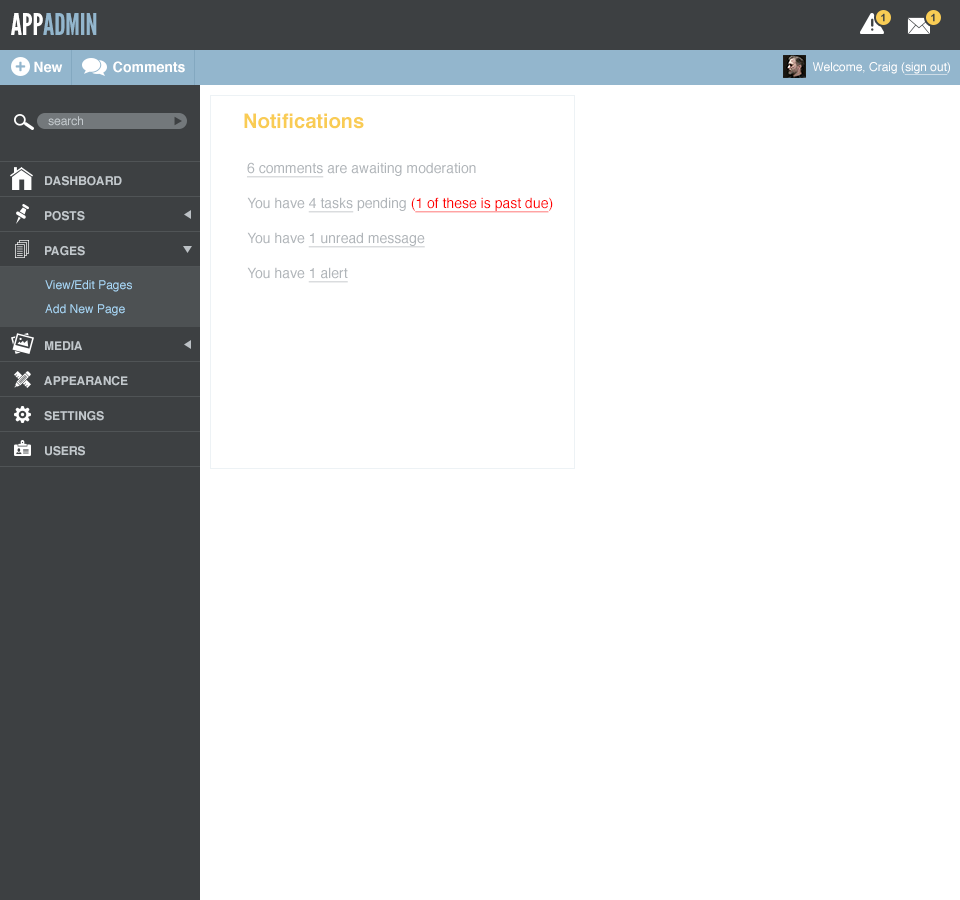
<style>
.page{position:relative;width:960px;height:900px;background:#ffffff}
.page>*{position:absolute;margin:0}
.t1{font:30px "LeagueGothic";color:#93b6cd}
.t2{font:30px "LeagueGothic";color:#ffffff}
.t3{font:14px "Helvetica-Bold";color:#ffffff}
.t4{font:12px "Helvetica";color:#ffffff}
.t5{font:12px "Helvetica";color:#ffffff;text-decoration:underline}
.t6{font:20px "Helvetica-Bold";color:#f9cc54}
.t7{font:12px "Helvetica";color:#c2c8cc}
.t8{font:14px/35px "Helvetica";color:#b0b5b9}
.t9{font:14px/35px "Helvetica";color:#b0b5b9;text-decoration:underline}
.t10{font:14px/35px "Helvetica";color:#ff0101}
.t11{font:14px/35px "Helvetica";color:#ff0101;text-decoration:underline}
.t12{font:12px "Helvetica-Bold";color:#c2c8cc}
.t13{font:12px/24px "Helvetica";color:#a9d7f6}
</style>
<div class="page">
<p class="t1" style="left:11px;top:13px;width:86px;height:22px"><span class="t2">APP</span>ADMIN</p>
<p class="t3" style="left:34px;top:61px;width:29px;height:12px">New</p>
<p class="t3" style="left:113px;top:61px;width:72px;height:12px">Comments</p>
<p class="t4" style="left:813px;top:62px;width:137px;height:13px">Welcome, Craig (<span class="t5">sign out</span>)</p>
<p class="t6" style="left:244px;top:113px;width:120px;height:16px">Notifications</p>
<p class="t7" style="left:48px;top:116px;width:35px;height:10px">search</p>
<p class="t8" style="left:247px;top:162px;width:306px;height:121px"><span class="t9">6 comments</span> are awaiting moderation<br>You have <span class="t9">4 tasks</span> pending <span class="t10">(</span><span class="t11">1 of these is past due</span><span class="t10">)<br></span>You have <span class="t9">1 unread message<br></span>You have <span class="t9">1 alert</span></p>
<p class="t12" style="left:45px;top:176px;width:77px;height:10px">DASHBOARD</p>
<p class="t12" style="left:45px;top:211px;width:40px;height:10px">POSTS</p>
<p class="t12" style="left:45px;top:246px;width:40px;height:10px">PAGES</p>
<p class="t13" style="left:45px;top:280px;width:87px;height:36px">View/Edit Pages<br>Add New Page</p>
<p class="t12" style="left:45px;top:341px;width:37px;height:9px">MEDIA</p>
<p class="t12" style="left:44px;top:376px;width:84px;height:10px">APPEARANCE</p>
<p class="t12" style="left:44px;top:411px;width:60px;height:10px">SETTINGS</p>
<p class="t12" style="left:45px;top:446px;width:40px;height:10px">USERS</p>
</div>
